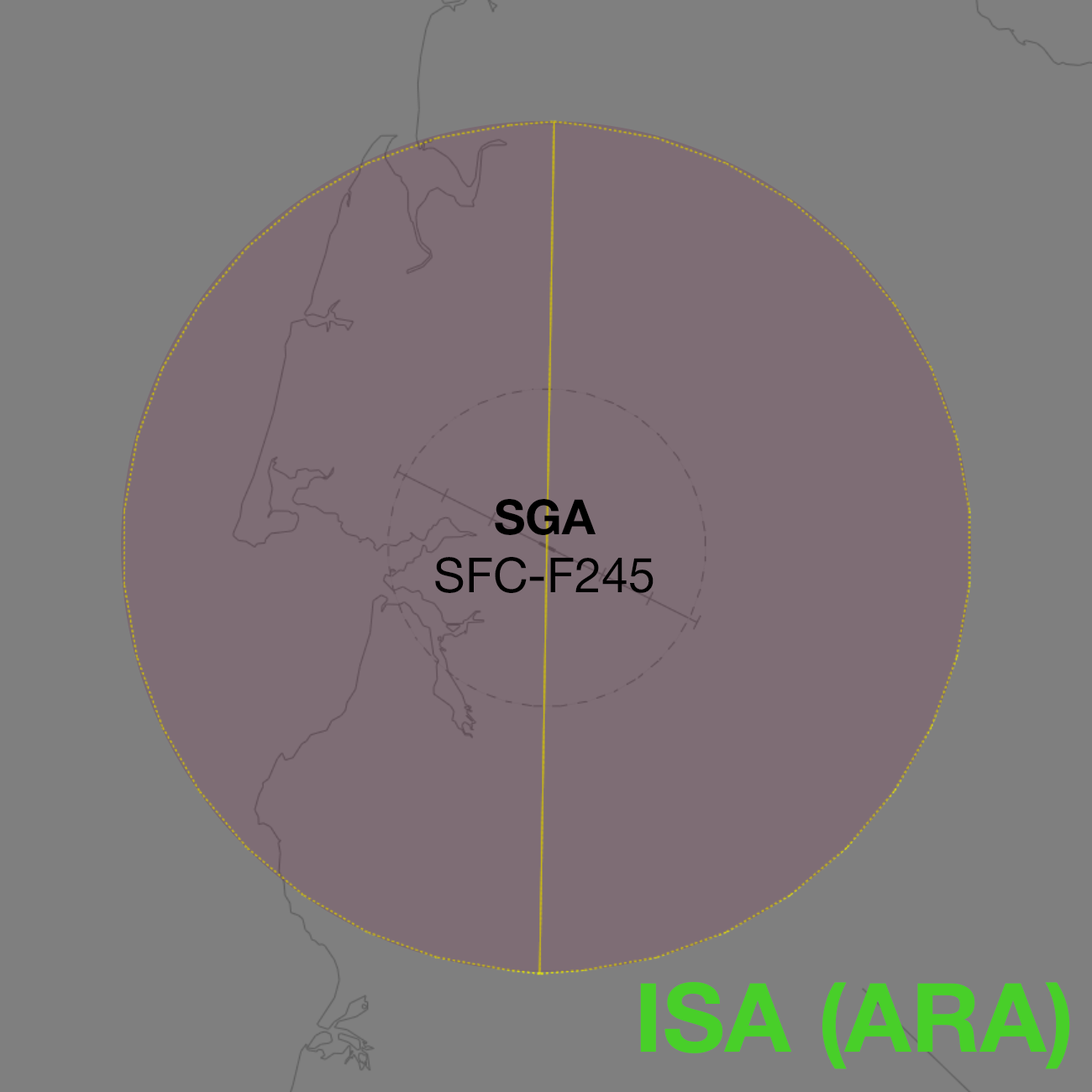
<style>
.page{position:relative;width:1092px;height:1092px;background:#7f7f7f}
.page>*{position:absolute;margin:0}
.t1{font:48.5px "HelveticaNeue-Roman";color:#000000}
.t2{font:48.5px "HelveticaNeue-Bold";color:#000000}
.t3{font:95.8px "HelveticaNeue-Bold";color:#48cf29}
</style>
<div class="page">
<p class="t1" style="left:435px;top:499px;width:219px;height:94px;text-align:center"><span class="t2">SGA<br></span>SFC-F245</p>
<p class="t3" style="left:640px;top:982px;width:430px;height:87px">ISA (ARA)</p>
</div>
